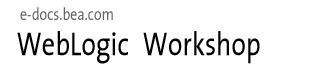
<style>
.page{position:relative;width:330px;height:70px;background:#ffffff}
.page>*{position:absolute;margin:0}
.t1{font:14px "TheSansPlainCond";color:#666666}
.t2{font:26.2px "TheSansPlainCond";letter-spacing:0.004em;color:#000000}
</style>
<div class="page">
<p class="t1" style="left:20px;top:7px;width:93px;height:13px">e-docs.bea.com</p>
<p class="t2" style="left:17px;top:31px;width:243px;height:33px">WebLogic Workshop</p>
</div>
